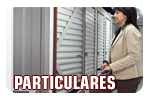
<style>
.page{position:relative;width:150px;height:100px;background:#ffffff}
.page>*{position:absolute;margin:0}
.t1{font:18px "Eurostile-BoldCondensed";color:#ffffff}
</style>
<div class="page">
<p class="t1" style="left:15px;top:75px;width:100px;height:15px">PARTICULARES</p>
</div>
